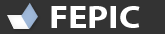
<style>
.page{position:relative;width:165px;height:34px;background:#333333}
.page>*{position:absolute;margin:0}
.t1{font:31.8px "MyriadPro-Bold";color:#ffffff;scale:1.13 1}
</style>
<div class="page">
<p class="t1" style="left:51px;top:6px;width:89px;height:22px">FEPIC</p>
</div>
